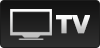
<style>
.page{position:relative;width:100px;height:48px}
.page>*{position:absolute;margin:0}
.t1{font:23.9px "DejaVuSans-Bold";font-weight:bold;scale:0.95 1}
</style>
<div class="page">
<p class="t1" style="left:56px;top:15px;width:34px;height:19px">TV</p>
</div>
